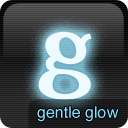
<style>
.page{position:relative;width:128px;height:128px}
.page>*{position:absolute;margin:0}
.t1{font:93px "Code2001";color:#effbff}
.t2{font:16px "Helvetica";color:#87defe}
</style>
<div class="page">
<p class="t1" style="left:38px;top:31px;width:54px;height:69px">𝐠</p>
<p class="t2" style="left:37px;top:106px;width:82px;height:16px">gentle glow</p>
</div>
